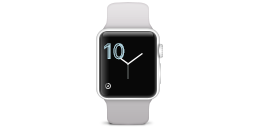
<style>
.page{position:relative;width:256px;height:128px;background:#ffffff}
.page>*{position:absolute;margin:0}
.t1{font:22px "SFUIDisplay-Bold";scale:0.86 1}
</style>
<div class="page">
<p class="t1" style="left:104px;top:43px;width:21px;height:17px">10</p>
</div>
